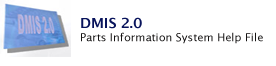
<style>
.page{position:relative;width:276px;height:66px;background:#ffffff}
.page>*{position:absolute;margin:0}
.t1{font:11px "LucidaSans";color:#151313}
.t2{font:14px "LucidaSans-Demi";color:#09145c}
</style>
<div class="page">
<p class="t1" style="left:81px;top:17px;width:182px;height:27px"><span class="t2">DMIS 2.0 <br></span>Parts Information System Help File</p>
</div>
